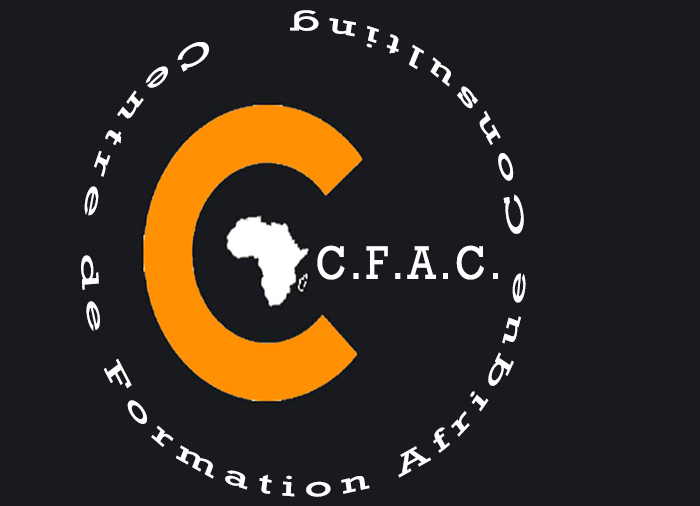
<style>
.page{position:relative;width:700px;height:506px;background:#191a1f}
.page>*{position:absolute;margin:0}
.t1{font:29.1px "Rockwell";letter-spacing:0.2em;color:#ffffff;scale:1.67 1}
.t2{font:48px "Rockwell";letter-spacing:0.1em;color:#ffffff;scale:0.83 1}
</style>
<div class="page">
<p class="t1" style="left:81px;top:10px;width:445px;height:487px">Centre de Formation Afrique Consulting</p>
<p class="t2" style="left:317px;top:245px;width:181px;height:35px">C.F.A.C.</p>
</div>
